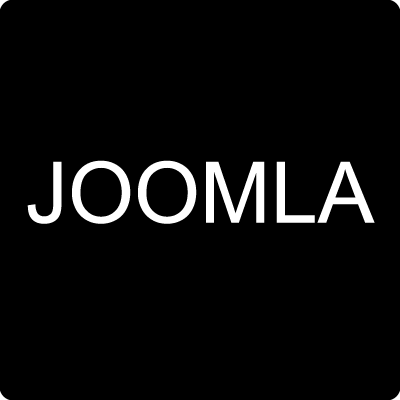
<style>
.page{position:relative;width:400px;height:400px;background:#000000}
.page>*{position:absolute;margin:0}
.t1{font:84.8px "ArialMT";color:#ffffff}
</style>
<div class="page">
<p class="t1" style="left:27px;top:160px;width:348px;height:64px">JOOMLA</p>
</div>
